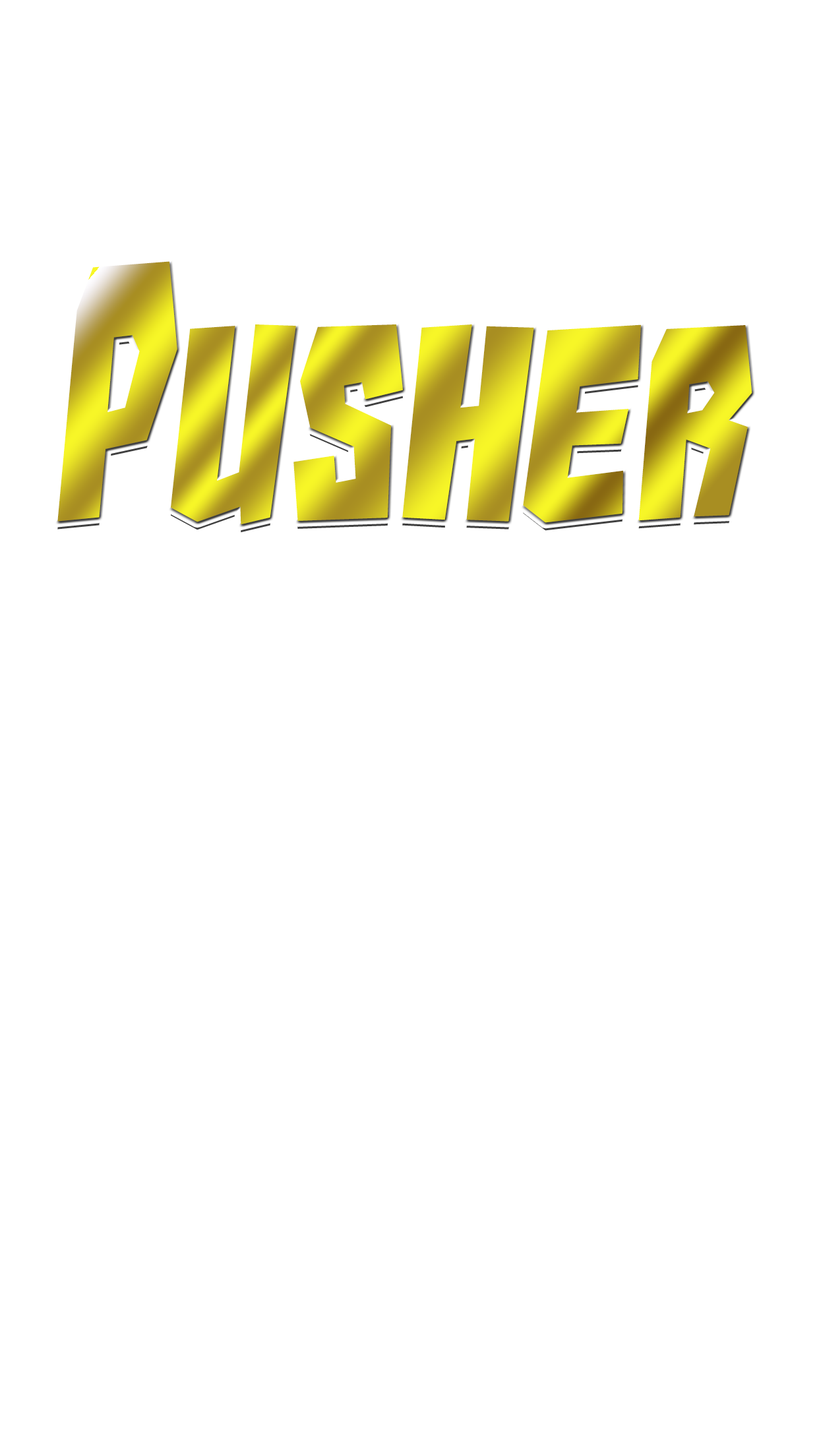
<style>
.page{position:relative;width:819px;height:1456px;background:#ffffff}
.page>*{position:absolute;margin:0}
.t1{font:238px "Kaiju-Monster__G";scale:1.19 1}
.t2{font:317.3px "Kaiju-Monster__G";scale:0.89 1}
</style>
<div class="page">
<p class="t1" style="left:57px;top:261px;width:695px;height:264px"><span class="t2"><br>P</span>usher</p>
</div>
